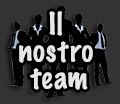
<style>
.page{position:relative;width:120px;height:104px;background:#333333}
.page>*{position:absolute;margin:0}
.t1{font:28px/27px "MarkerFelt-Thin";color:#ffffff}
</style>
<div class="page">
<p class="t1" style="left:19px;top:11px;width:74px;height:79px;text-align:center">Il <br>nostro <br>team</p>
</div>
